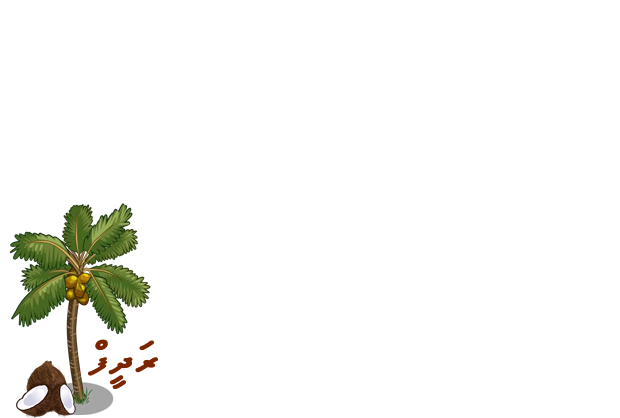
<style>
.page{position:relative;width:620px;height:418px;background:#ffffff}
.page>*{position:absolute;margin:0}
.t1{font:38.4px "MvMAGR";color:#7c2600;scale:1.17 1}
</style>
<div class="page">
<p class="t1" style="left:88px;top:339px;width:70px;height:50px">ްފީދަރ</p>
</div>
